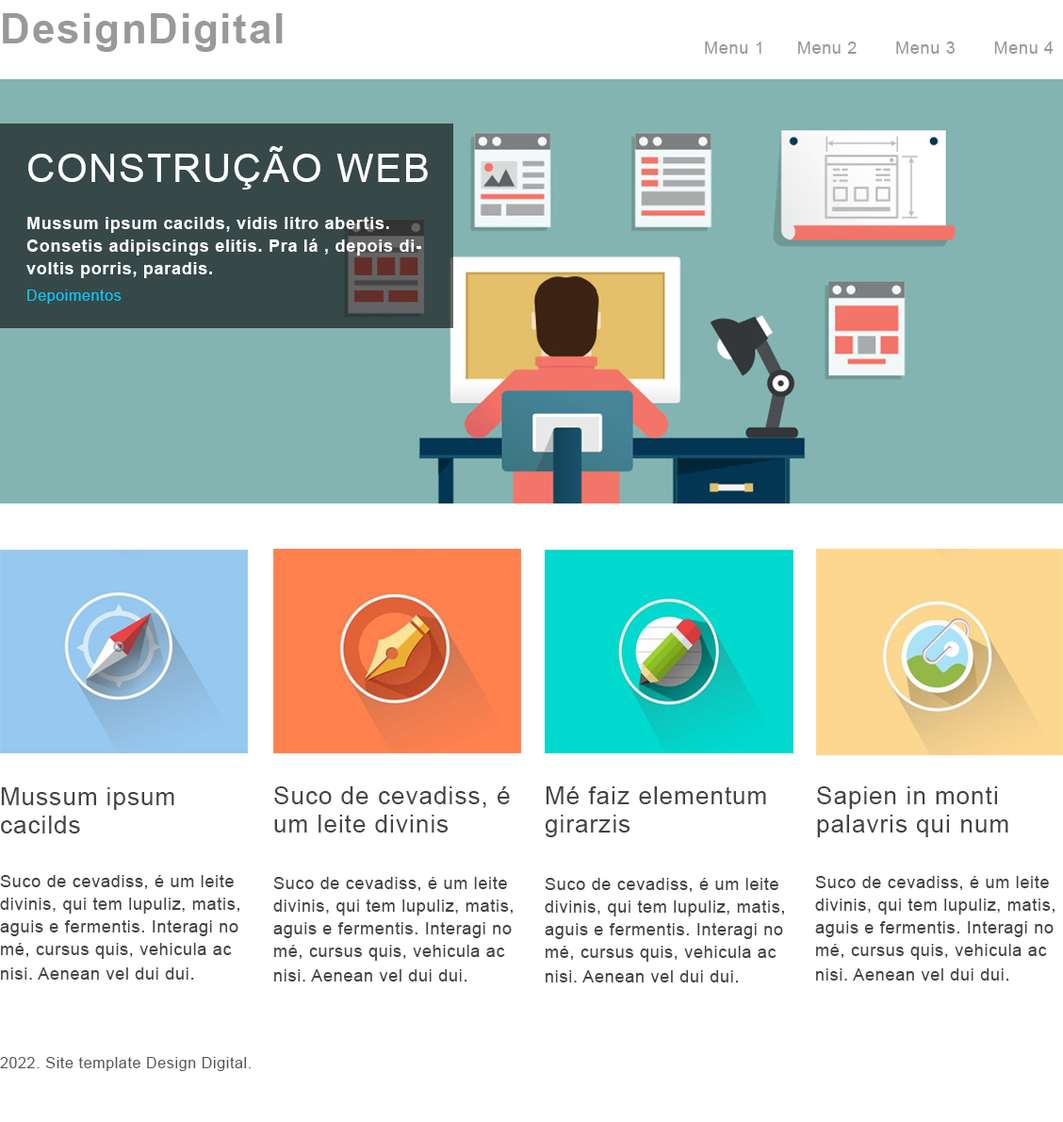
<style>
.page{position:relative;width:1063px;height:1122px;background:#ffffff}
.page>*{position:absolute;margin:0}
.t1{font:41.5px "Arial-BoldMT";letter-spacing:0.04em;color:#999999}
.t2{font:17px "ArialMT";letter-spacing:0.04em;color:#999999}
.t3{font:39.6px "ArialMT";letter-spacing:0.04em;color:#ffffff}
.t4{font:17px/22.6px "Arial-BoldMT";letter-spacing:0.04em;color:#ffffff}
.t5{font:15.1px "ArialMT";letter-spacing:0.04em;color:#00ccff}
.t6{font:24.5px/28.3px "ArialMT";letter-spacing:0.04em;color:#444444}
.t7{font:17px/22.6px "ArialMT";letter-spacing:0.04em;color:#444444}
.t8{font:15.1px "ArialMT";letter-spacing:0.04em;color:#575654}
</style>
<div class="page">
<p class="t1" style="left:3px;top:13px;width:280px;height:39px">DesignDigital</p>
<p class="t2" style="left:705px;top:41px;width:349px;height:13px">Menu 1      Menu 2       Menu 3       Menu 4</p>
<p class="t3" style="left:28px;top:146px;width:400px;height:43px">CONSTRUÇÃO WEB</p>
<p class="t4" style="left:26px;top:217px;width:395px;height:61px">Mussum ipsum cacilds, vidis litro abertis. Consetis adipiscings elitis. Pra lá , depois divoltis porris, paradis.</p>
<p class="t5" style="left:27px;top:289px;width:95px;height:14px">Depoimentos</p>
<p class="t6" style="left:1px;top:787px;width:173px;height:46px">Mussum ipsum cacilds</p>
<p class="t6" style="left:274px;top:786px;width:236px;height:46px">Suco de cevadiss, é um leite divinis</p>
<p class="t6" style="left:545px;top:786px;width:221px;height:51px">Mé faiz elementum girarzis</p>
<p class="t6" style="left:817px;top:786px;width:191px;height:51px">Sapien in monti palavris qui num</p>
<p class="t7" style="left:0px;top:875px;width:239px;height:104px">Suco de cevadiss, é um leite divinis, qui tem lupuliz, matis, aguis e fermentis. Interagi no mé, cursus quis, vehicula ac nisi. Aenean vel dui dui.</p>
<p class="t7" style="left:273px;top:877px;width:240px;height:104px">Suco de cevadiss, é um leite divinis, qui tem lupuliz, matis, aguis e fermentis. Interagi no mé, cursus quis, vehicula ac nisi. Aenean vel dui dui.</p>
<p class="t7" style="left:545px;top:877px;width:239px;height:105px">Suco de cevadiss, é um leite divinis, qui tem lupuliz, matis, aguis e fermentis. Interagi no mé, cursus quis, vehicula ac nisi. Aenean vel dui dui.</p>
<p class="t7" style="left:815px;top:876px;width:240px;height:104px">Suco de cevadiss, é um leite divinis, qui tem lupuliz, matis, aguis e fermentis. Interagi no mé, cursus quis, vehicula ac nisi. Aenean vel dui dui.</p>
<p class="t8" style="left:0px;top:1057px;width:251px;height:14px">2022. Site template Design Digital.</p>
</div>
